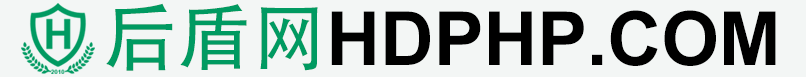
<style>
.page{position:relative;width:806px;height:77px;background:#f3f6f5}
.page>*{position:absolute;margin:0}
.t1{font:74.4px "Arial-BoldMT";color:#000000}
.t2{font:74.4px "AdobeHeitiStd-Regular";color:#009a61}
</style>
<div class="page">
<p class="t1" style="left:106px;top:3px;width:670px;height:68px"><span class="t2">后盾网</span>HDPHP.COM</p>
</div>
